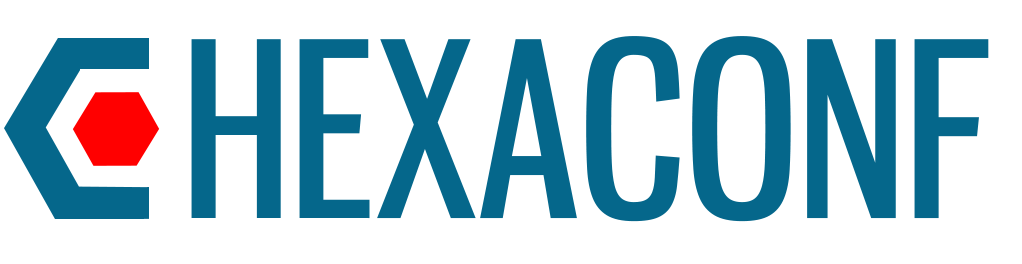
<style>
.page{position:relative;width:1022px;height:264px;background:#ffffff}
.page>*{position:absolute;margin:0}
.t1{font:240.3px "GnuolaneRg-Regular";color:#05678b}
</style>
<div class="page">
<p class="t1" style="left:191px;top:36px;width:798px;height:186px">HEXACONF</p>
</div>
